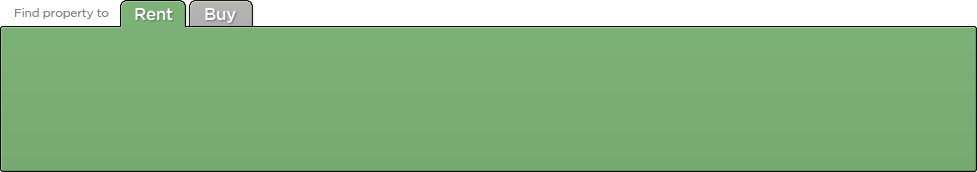
<style>
.page{position:relative;width:977px;height:172px}
.page>*{position:absolute;margin:0}
.t1{font:12px "GothamBook";letter-spacing:-0.02em;color:#858585}
.t2{font:17px "GothamMedium";letter-spacing:-0.02em;color:#ffffff}
</style>
<div class="page">
<p class="t1" style="left:15px;top:8px;width:94px;height:11px">Find property to</p>
<p class="t2" style="left:135px;top:8px;width:38px;height:13px">Rent</p>
<p class="t2" style="left:205px;top:8px;width:31px;height:15px">Buy</p>
</div>
